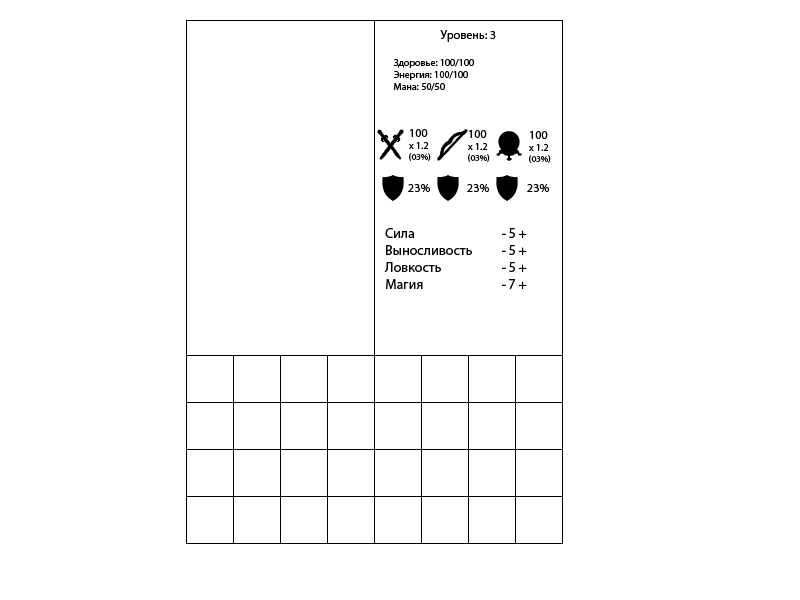
<style>
.page{position:relative;width:800px;height:600px;background:#ffffff}
.page>*{position:absolute;margin:0}
.t1{font:12px "MyriadPro-Regular";color:#000000}
.t2{font:10px "MyriadPro-Regular";color:#000000}
.t3{font:9px "MyriadPro-Regular";color:#000000}
.t4{font:14px "MyriadPro-Regular";color:#000000}
</style>
<div class="page">
<p class="t1" style="left:440px;top:30px;width:56px;height:12px">Уровень: 3</p>
<p class="t2" style="left:393px;top:59px;width:81px;height:32px">Здоровье: 100/100<br>Энергия: 100/100<br>Мана: 50/50</p>
<p class="t2" style="left:409px;top:129px;width:22px;height:32px"><span class="t1">100<br></span>x 1.2<br><span class="t3">(03%)</span></p>
<p class="t2" style="left:468px;top:130px;width:22px;height:32px"><span class="t1">100<br></span>x 1.2<br><span class="t3">(03%)</span></p>
<p class="t2" style="left:529px;top:131px;width:22px;height:32px"><span class="t1">100<br></span>x 1.2<br><span class="t3">(03%)</span></p>
<p class="t1" style="left:408px;top:184px;width:22px;height:8px">23%</p>
<p class="t1" style="left:467px;top:184px;width:22px;height:8px">23%</p>
<p class="t1" style="left:527px;top:184px;width:22px;height:8px">23%</p>
<p class="t4" style="left:384px;top:228px;width:88px;height:61px">Сила<br>Выносливость<br>Ловкость<br>Магия</p>
<p class="t4" style="left:502px;top:228px;width:25px;height:61px">- 5 +<br>- 5 +<br>- 5 +<br>- 7 +</p>
</div>
